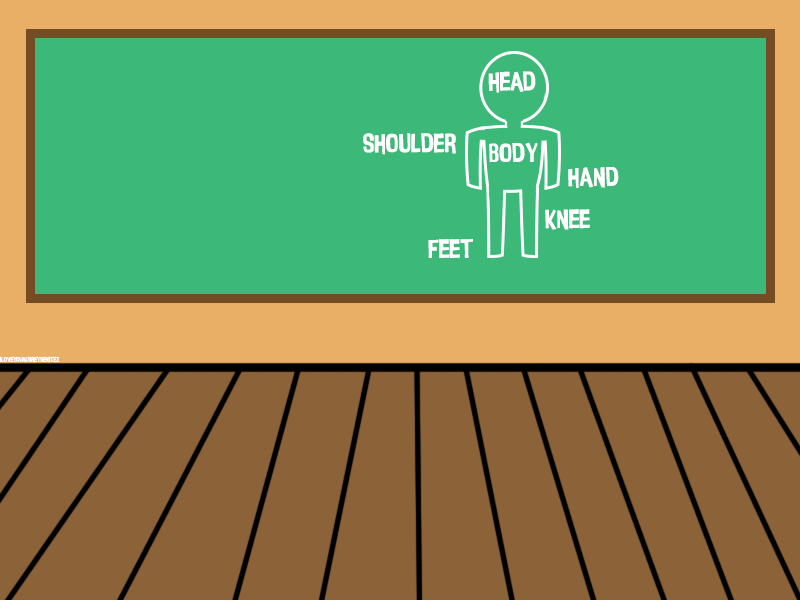
<style>
.page{position:relative;width:800px;height:600px;background:#3cb878}
.page>*{position:absolute;margin:0}
.t1{font:27px "InsideOut";color:#ffffff}
.t2{font:7px "InsideOut";color:#ffffff}
</style>
<div class="page">
<p class="t1" style="left:488px;top:71px;width:48px;height:22px">head</p>
<p class="t1" style="left:363px;top:133px;width:93px;height:22px">shoulder</p>
<p class="t1" style="left:489px;top:142px;width:49px;height:20px">body</p>
<p class="t1" style="left:568px;top:167px;width:51px;height:21px">hand</p>
<p class="t1" style="left:545px;top:209px;width:45px;height:21px">knee</p>
<p class="t1" style="left:428px;top:239px;width:45px;height:19px">feet</p>
<p class="t2" style="left:0px;top:356px;width:60px;height:7px">iloveyouaubreybenitez</p>
</div>
